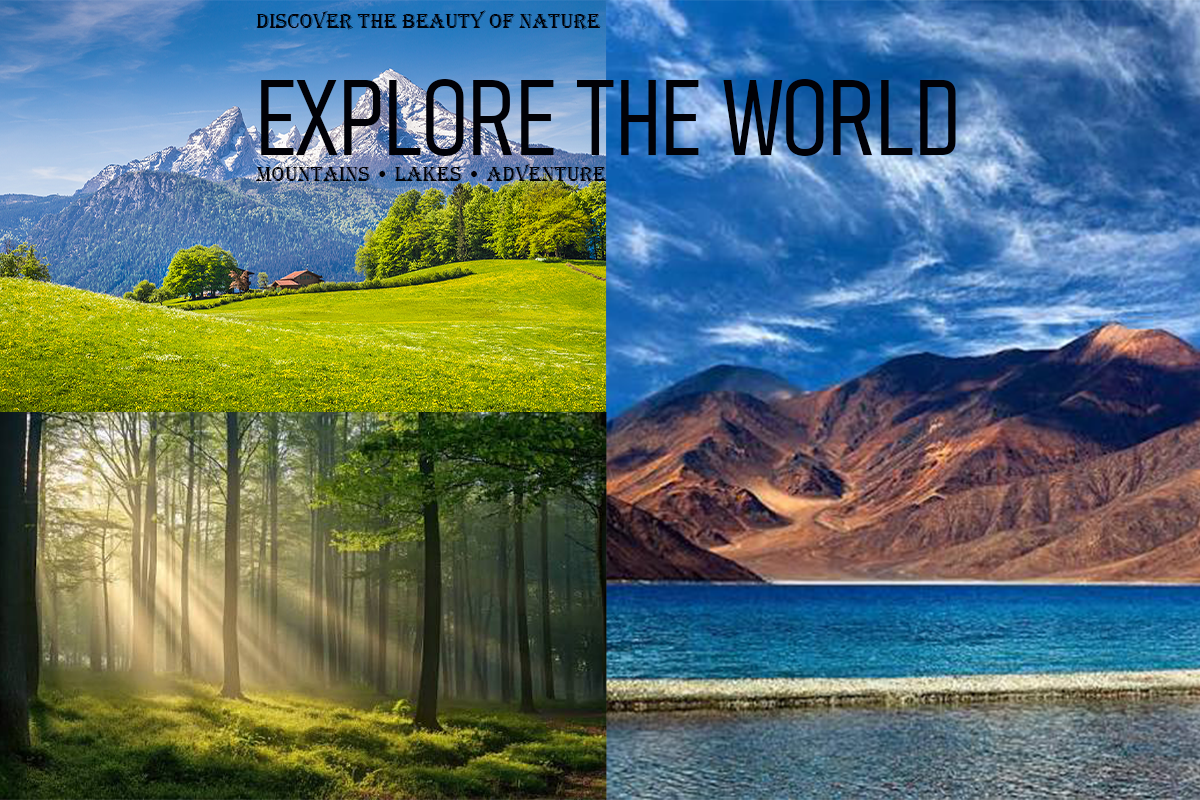
<style>
.page{position:relative;width:1200px;height:800px}
.page>*{position:absolute;margin:0}
.t1{font:21.2px "Algerian";color:#000106}
.t2{font:106.1px "Bahnschrift-LightCondensed";color:#010106}
.t3{font:21.2px "Algerian";color:#010104}
</style>
<div class="page">
<p class="t1" style="left:256px;top:10px;width:700px;height:173px">DISCOVER THE BEAUTY OF NATURE<br><span class="t2">EXPLORE THE WORLD<br></span><span class="t3">Mountains • Lakes • Adventure</span></p>
</div>
